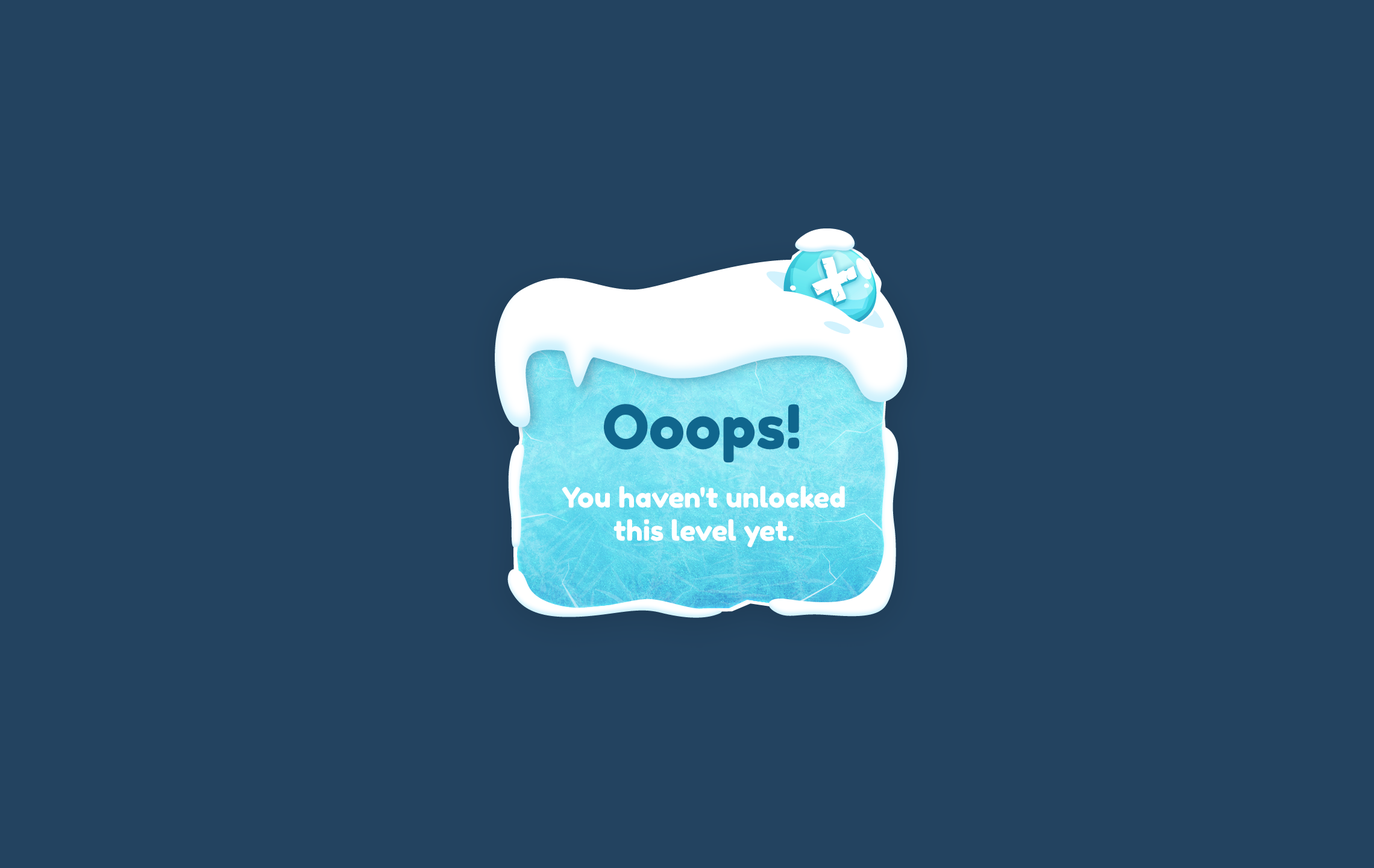
<style>
.page{position:relative;width:1374px;height:868px;background:#234360}
.page>*{position:absolute;margin:0}
.t1{font:60.3px "FredokaOne-Regular";color:#10668d}
.t2{font:27.7px "FredokaOne-Regular";color:#ffffff}
</style>
<div class="page">
<p class="t1" style="left:604px;top:404px;width:196px;height:59px">Ooops!</p>
<p class="t2" style="left:562px;top:486px;width:283px;height:61px;text-align:center">You haven't unlocked<br>this level yet.</p>
</div>
